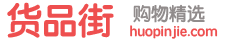
<style>
.page{position:relative;width:246px;height:40px;background:#ffffff}
.page>*{position:absolute;margin:0}
.t1{font:36px "STYuanti-SC-Bold";color:#ee4f4f}
.t2{font:18px "STYuanti-SC-Bold";color:#918c8c}
.t3{font:14px "STYuanti-SC-Bold";color:#ee4f4f}
</style>
<div class="page">
<p class="t1" style="left:7px;top:2px;width:107px;height:36px">货品街</p>
<p class="t2" style="left:133px;top:4px;width:72px;height:19px">购物精选</p>
<p class="t3" style="left:130px;top:25px;width:88px;height:14px">huopinjie.com</p>
</div>
